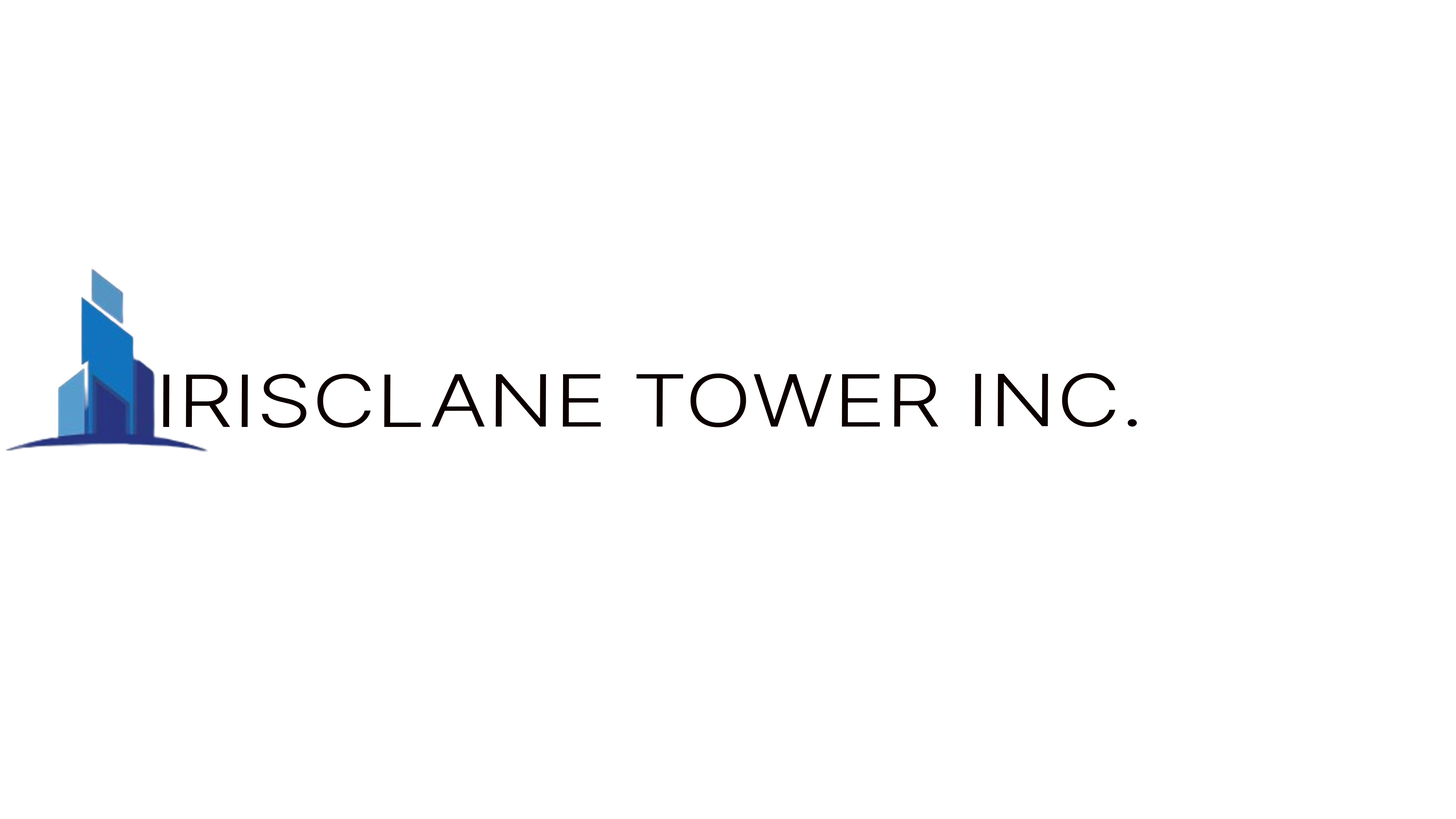
<style>
.page{position:relative;width:1456px;height:819px;background:#ffffff}
.page>*{position:absolute;margin:0}
.t1{font:71.9px "Inter-LightBETA";color:#0c0000;scale:1.23 1}
</style>
<div class="page">
<p class="t1" style="left:163px;top:373px;width:974px;height:55px">IRISCLANE TOWER INC.</p>
</div>
